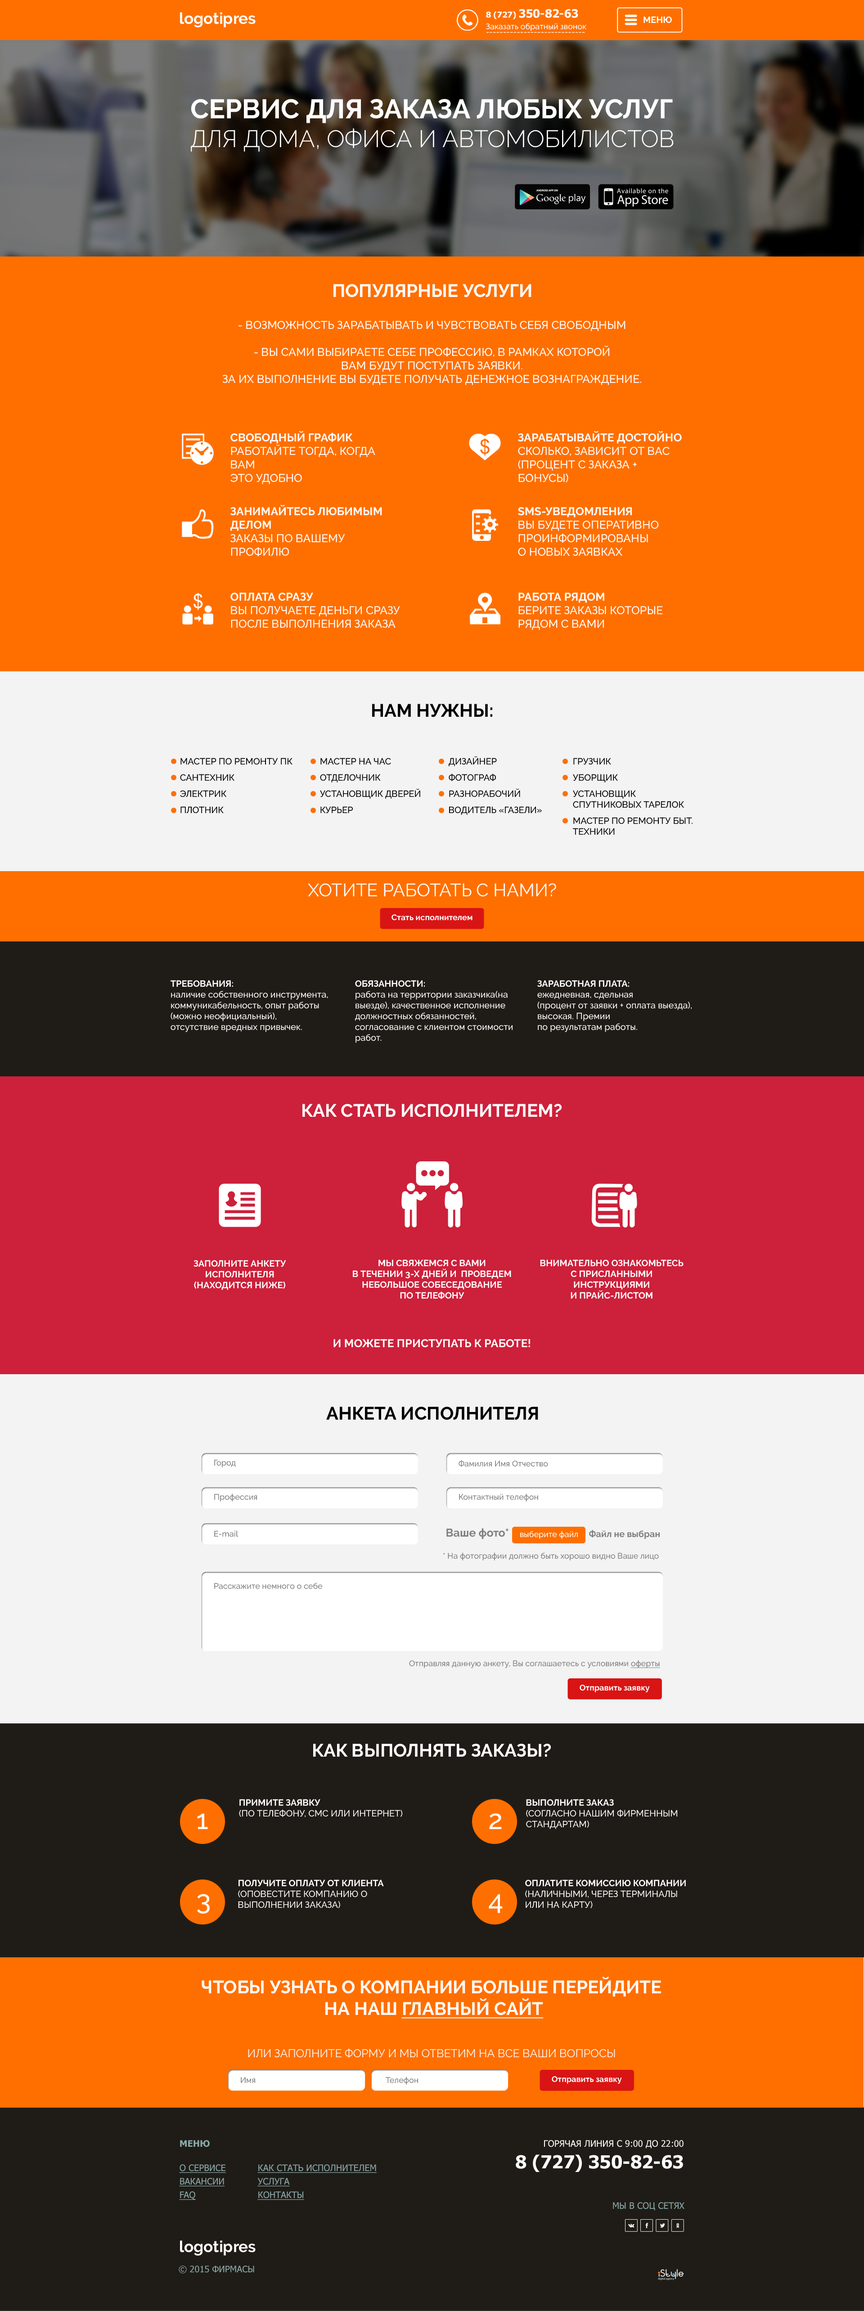
<style>
.page{position:relative;width:864px;height:2311px;background:#ff6f00}
.page>*{position:absolute;margin:0}
.t1{font:15.8px "Raleway-Bold";color:#fefefe}
.t2{font:11.2px "Tahoma-Bold";color:#ffffff}
.t3{font:8.1px "Tahoma-Bold";color:#ffffff}
.t4{font:9px "Raleway-Bold";color:#ffffff;text-transform:uppercase}
.t5{font:8.1px "Raleway-Medium";color:#ffffff}
.t6{font:8.1px "Raleway-Medium"}
.t7{font:23.9px "Raleway-Light";color:#ffffff;text-transform:uppercase}
.t8{font:27px "Raleway-Bold";color:#ffffff;text-transform:uppercase}
.t9{font:18px "Raleway-Bold";color:#ffffff;text-transform:uppercase}
.t10{font:11.2px "Raleway-Medium";color:#ffffff;text-transform:uppercase}
.t11{font:11.2px "Raleway-Bold";color:#ffffff;text-transform:uppercase}
.t12{font:18px "Raleway-Bold";color:#000000;text-transform:uppercase}
.t13{font:9px/16.2px "Raleway-Medium";color:#000000;text-transform:uppercase}
.t14{font:9px "Raleway-Medium";color:#000000;text-transform:uppercase}
.t15{font:18px "Raleway-Regular";color:#ffffff;text-transform:uppercase}
.t16{font:8.1px "Raleway-Bold";color:#ffffff}
.t17{font:9px "Raleway-Medium";color:#ffffff}
.t18{font:8.1px "Raleway-Medium";color:#808080}
.t19{font:11.2px "Raleway-Bold";color:#808080}
.t20{font:9px "Raleway-Bold";color:#808080}
.t21{font:8.1px "Raleway-Medium";color:#808080;text-decoration:underline}
.t22{font:9px "Raleway-Medium";color:#ffffff;text-transform:uppercase}
.t23{font:27px "Raleway-Medium";color:#ffffff;text-transform:uppercase}
.t24{font:18px "Raleway-Bold";color:#ffffff;text-transform:uppercase;text-decoration:underline}
.t25{font:11.2px "Raleway-Regular";color:#ffffff;text-transform:uppercase}
.t26{font:9px "Tahoma-Bold";color:#8aa9a9;text-transform:uppercase}
.t27{font:9px "Tahoma";color:#ffffff;text-transform:uppercase}
.t28{font:18px "Tahoma-Bold";color:#ffffff;text-transform:uppercase}
.t29{font:9px/13.5px "Tahoma";color:#8aa9a9;text-transform:uppercase;text-decoration:underline}
.t30{font:9px "Tahoma";color:#8aa9a9;text-transform:uppercase}
</style>
<div class="page">
<p class="t1" style="left:180px;top:12px;width:76px;height:15px">logotipres</p>
<p class="t2" style="left:486px;top:9px;width:92px;height:10px"><span class="t3">8 (727) </span>350-82-63</p>
<p class="t4" style="left:644px;top:16px;width:28px;height:7px">МЕНЮ</p>
<p class="t5" style="left:486px;top:23px;width:100px;height:8px">Заказать обратный звонок</p>
<p class="t6" style="left:486px;top:32px;width:99px;height:1px">-----------------------------</p>
<p class="t7" style="left:191px;top:99px;width:483px;height:53px"><span class="t8">СЕРВИС ДЛЯ ЗАКАЗА ЛЮБЫХ УСЛУГ <br></span>для дома, офиса и автомобилистов</p>
<p class="t9" style="left:333px;top:284px;width:198px;height:13px">ПОПУЛЯРНЫЕ УСЛУГИ</p>
<p class="t10" style="left:222px;top:321px;width:419px;height:64px;text-align:center">- возможность зарабатывать и чувствовать себя свободным<br><br>- Вы сами выбираете себе профессию, в рамках которой <br>вам будут поступать заявки. <br>За их выполнение вы будете получать денежное вознаграждение.</p>
<p class="t10" style="left:230px;top:431px;width:145px;height:53px"><span class="t11">Свободный график<br></span>Работайте тогда, когда Вам<br>это удобно</p>
<p class="t10" style="left:518px;top:431px;width:164px;height:51px"><span class="t11">Зарабатывайте достойно<br></span>Сколько, зависит от Вас<br>(процент с заказа + бонусы)</p>
<p class="t11" style="left:230px;top:505px;width:152px;height:51px">Занимайтесь любимым делом<br><span class="t10">Заказы по вашему профилю</span></p>
<p class="t10" style="left:518px;top:507px;width:141px;height:49px"><span class="t11">SMS-уведомления<br></span>Вы будете оперативно проинформированы <br>о новых заявках</p>
<p class="t10" style="left:230px;top:593px;width:170px;height:35px"><span class="t11">Оплата сразу<br></span>Вы получаете деньги сразу после выполнения заказа</p>
<p class="t10" style="left:518px;top:593px;width:145px;height:37px"><span class="t11">Работа рядом<br></span>Берите заказы которые<br>рядом с Вами</p>
<p class="t12" style="left:372px;top:704px;width:120px;height:13px">НАМ НУЖНЫ:</p>
<p class="t13" style="left:180px;top:758px;width:112px;height:56px">Мастер по ремонту ПК<br>Сантехник<br>Электрик<br>Плотник</p>
<p class="t13" style="left:320px;top:758px;width:100px;height:56px">Мастер на час<br>Отделочник<br>Установщик дверей<br>Курьер</p>
<p class="t13" style="left:449px;top:756px;width:93px;height:59px">Дизайнер<br>Фотограф<br>Разнорабочий<br>Водитель «Газели»</p>
<p class="t13" style="left:573px;top:758px;width:120px;height:77px">Грузчик<br>Уборщик<br>Установщик <br><span class="t14">спутниковых тарелок<br></span>Мастер по ремонту быт<span class="t14">. техники</span></p>
<p class="t15" style="left:308px;top:883px;width:248px;height:14px">Хотите работать с нами?</p>
<p class="t16" style="left:392px;top:914px;width:80px;height:7px">Стать исполнителем</p>
<p class="t17" style="left:171px;top:980px;width:157px;height:52px"><span class="t4">Требования: <br></span>наличие собственного инструмента, коммуникабельность, опыт работы <br>(можно неофициальный), <br>отсутствие вредных привычек.</p>
<p class="t17" style="left:355px;top:980px;width:158px;height:63px"><span class="t4">Обязанности: <br></span>работа на территории заказчика(на выезде), качественное исполнение должностных обязанностей, согласование с клиентом стоимости работ.</p>
<p class="t17" style="left:537px;top:980px;width:155px;height:52px"><span class="t4">Заработная плата: <br></span>ежедневная, сдельная <br>(процент от заявки + оплата выезда), высокая. Премии <br>по результатам работы.</p>
<p class="t9" style="left:302px;top:1104px;width:260px;height:13px">КАК СТАТЬ ИСПОЛНИТЕЛЕМ?</p>
<p class="t4" style="left:194px;top:1260px;width:92px;height:30px;text-align:center">Заполните анкету<br>исполнителя<br>(находится ниже)</p>
<p class="t4" style="left:353px;top:1260px;width:158px;height:39px;text-align:center">Мы свяжемся с вами <br>в течении 3-х дней и  проведем <br>небольшое собеседование <br>по телефону</p>
<p class="t4" style="left:540px;top:1260px;width:144px;height:39px;text-align:center">Внимательно ознакомьтесь <br>с присланными инструкциями <br>и прайс-листом</p>
<p class="t11" style="left:333px;top:1339px;width:197px;height:9px">И можете приступать к работе!</p>
<p class="t12" style="left:326px;top:1407px;width:212px;height:13px">АНКЕТА ИСПОЛНИТЕЛЯ</p>
<p class="t18" style="left:214px;top:1460px;width:22px;height:7px">Город</p>
<p class="t18" style="left:459px;top:1460px;width:89px;height:7px">Фамилия Имя Отчество</p>
<p class="t18" style="left:214px;top:1494px;width:43px;height:8px">Профессия</p>
<p class="t18" style="left:459px;top:1494px;width:79px;height:8px">Контактный телефон</p>
<p class="t19" style="left:446px;top:1528px;width:62px;height:11px">Ваше фото*</p>
<p class="t18" style="left:214px;top:1530px;width:24px;height:7px">E-mail</p>
<p class="t5" style="left:520px;top:1531px;width:58px;height:8px">выберите файл</p>
<p class="t20" style="left:589px;top:1530px;width:71px;height:9px">Файл не выбран</p>
<p class="t18" style="left:443px;top:1552px;width:216px;height:9px">* На фотографии должно быть хорошо видно Ваше лицо</p>
<p class="t18" style="left:214px;top:1583px;width:109px;height:6px">Расскажите немного о себе</p>
<p class="t18" style="left:409px;top:1660px;width:251px;height:8px">Отправляя данную анкету, Вы соглашаетесь с условиями <span class="t21">оферты</span></p>
<p class="t16" style="left:580px;top:1685px;width:70px;height:7px">Отправить заявку</p>
<p class="t9" style="left:313px;top:1744px;width:238px;height:13px">КАК ВЫПОЛНЯТЬ ЗАКАЗЫ?</p>
<p class="t22" style="left:239px;top:1799px;width:163px;height:19px"><span class="t4">Примите заявку<br></span>(по телефону, смс или интернет)</p>
<p class="t22" style="left:526px;top:1799px;width:151px;height:30px"><span class="t4">Выполните заказ<br></span>(согласно нашим фирменным стандартам)</p>
<p class="t23" style="left:197px;top:1814px;width:11px;height:15px">1</p>
<p class="t23" style="left:489px;top:1814px;width:13px;height:15px">2</p>
<p class="t22" style="left:238px;top:1880px;width:146px;height:28px"><span class="t4">Получите оплату от клиента<br></span>(оповестите компанию о выполнении заказа)</p>
<p class="t22" style="left:525px;top:1880px;width:161px;height:28px"><span class="t4">Оплатите комиссию компании<br></span>(наличными, через терминалы или на карту)</p>
<p class="t23" style="left:197px;top:1894px;width:13px;height:20px">3</p>
<p class="t23" style="left:489px;top:1894px;width:14px;height:19px">4</p>
<p class="t9" style="left:202px;top:1977px;width:459px;height:42px;text-align:center">Чтобы узнать о компании больше перейдите <br>на наш <span class="t24">главный сайт</span></p>
<p class="t25" style="left:248px;top:2048px;width:367px;height:10px">или заполните форму и мы ответим на все Ваши вопросы</p>
<p class="t18" style="left:241px;top:2077px;width:14px;height:6px">Имя</p>
<p class="t18" style="left:386px;top:2077px;width:32px;height:8px">Телефон</p>
<p class="t16" style="left:552px;top:2076px;width:70px;height:8px">Отправить заявку</p>
<p class="t26" style="left:180px;top:2140px;width:30px;height:7px">МЕНЮ</p>
<p class="t27" style="left:516px;top:2140px;width:168px;height:32px;text-align:right">Горячая линия с 9:00 до 22:00<br><span class="t28">8 (727) 350-82-63</span></p>
<p class="t29" style="left:179px;top:2164px;width:47px;height:36px">О cервисе<br>Вакансии<br>faq</p>
<p class="t29" style="left:257px;top:2164px;width:120px;height:36px">Как стать исполнителем<br>услуга<br>контакты</p>
<p class="t30" style="left:613px;top:2202px;width:71px;height:9px">Мы в соц сетях</p>
<p class="t1" style="left:180px;top:2241px;width:76px;height:15px">logotipres</p>
<p class="t30" style="left:179px;top:2266px;width:75px;height:8px">© 2015 фирмасы</p>
</div>
